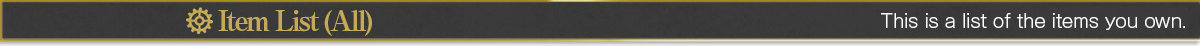
<style>
.page{position:relative;width:1200px;height:46px}
.page>*{position:absolute;margin:0}
.t1{font:28px "RyuminPro-ExBold";letter-spacing:-0.08em;color:#c4a956}
.t2{font:18px "GothicMB101Pro-Light";color:#ffffff}
</style>
<div class="page">
<p class="t1" style="left:218px;top:10px;width:154px;height:26px">Item List (All)</p>
<p class="t2" style="left:881px;top:13px;width:304px;height:17px">This is a list of the items you own.</p>
</div>
